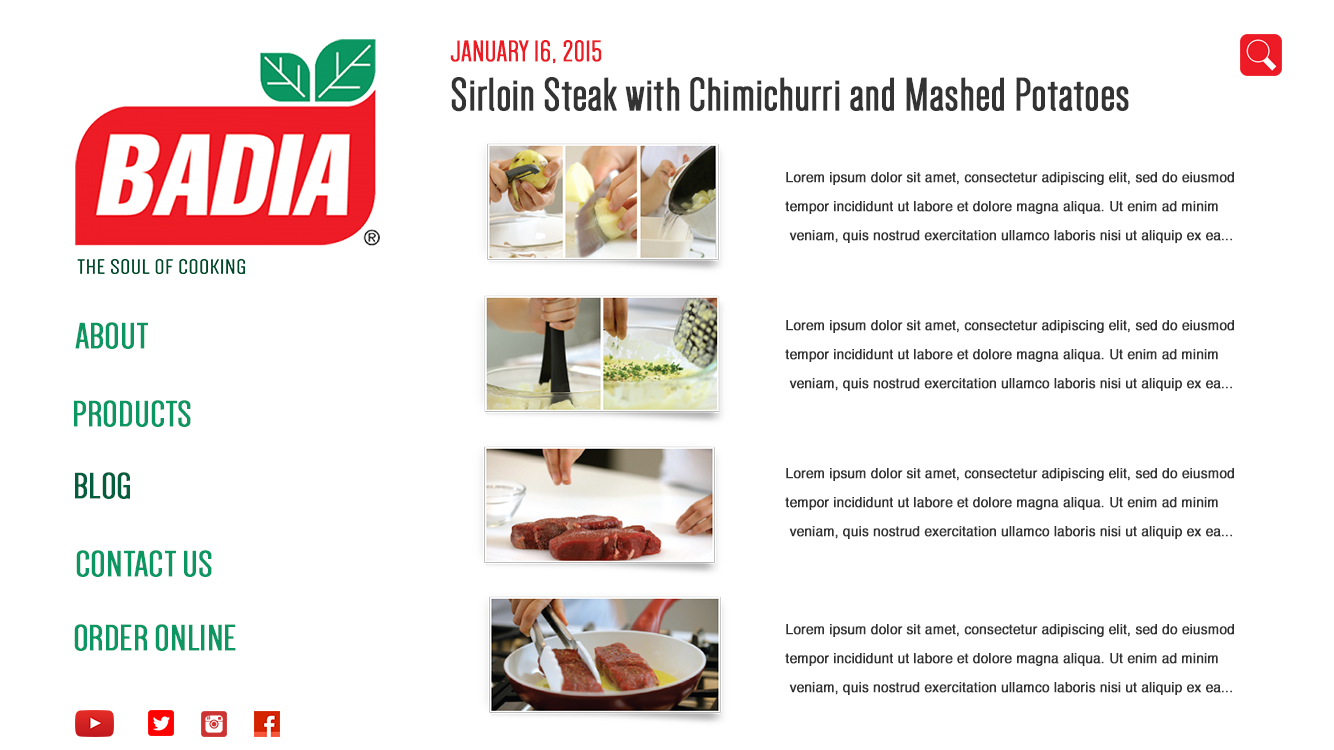
<style>
.page{position:relative;width:1334px;height:750px;background:#ffffff}
.page>*{position:absolute;margin:0}
.t1{font:30.6px "Dense-Regular";color:#ec1c25;text-transform:uppercase;font-weight:bold}
.t2{font:48.1px "Dense-Regular";color:#333333;font-weight:bold}
.t3{font:13.6px/29.2px "Helvetica";color:#333333;font-weight:bold}
.t4{font:37.5px "Dense-Regular";color:#0b9662;text-transform:uppercase;font-weight:bold;scale:1.1 1}
.t5{font:37.5px "Dense-Regular";color:#045d3c;text-transform:uppercase;font-weight:bold;scale:1.1 1}
</style>
<div class="page">
<p class="t1" style="left:450px;top:40px;width:152px;height:24px">january 16, 2015</p>
<p class="t2" style="left:451px;top:77px;width:678px;height:35px">Sirloin Steak with Chimichurri and Mashed Potatoes</p>
<p class="t3" style="left:785px;top:172px;width:449px;height:71px">Lorem ipsum dolor sit amet, consectetur adipiscing elit, sed do eiusmod <br>tempor incididunt ut labore et dolore magna aliqua. Ut enim ad minim<br> veniam, quis nostrud exercitation ullamco laboris nisi ut aliquip ex ea...</p>
<p class="t4" style="left:75px;top:322px;width:73px;height:27px">about</p>
<p class="t3" style="left:785px;top:320px;width:449px;height:71px">Lorem ipsum dolor sit amet, consectetur adipiscing elit, sed do eiusmod <br>tempor incididunt ut labore et dolore magna aliqua. Ut enim ad minim<br> veniam, quis nostrud exercitation ullamco laboris nisi ut aliquip ex ea...</p>
<p class="t4" style="left:74px;top:400px;width:117px;height:27px">products</p>
<p class="t5" style="left:75px;top:472px;width:55px;height:27px">blog</p>
<p class="t3" style="left:785px;top:468px;width:449px;height:71px">Lorem ipsum dolor sit amet, consectetur adipiscing elit, sed do eiusmod <br>tempor incididunt ut labore et dolore magna aliqua. Ut enim ad minim<br> veniam, quis nostrud exercitation ullamco laboris nisi ut aliquip ex ea...</p>
<p class="t4" style="left:76px;top:550px;width:136px;height:27px">contact us</p>
<p class="t4" style="left:74px;top:624px;width:162px;height:27px">order online</p>
<p class="t3" style="left:785px;top:624px;width:449px;height:71px">Lorem ipsum dolor sit amet, consectetur adipiscing elit, sed do eiusmod <br>tempor incididunt ut labore et dolore magna aliqua. Ut enim ad minim<br> veniam, quis nostrud exercitation ullamco laboris nisi ut aliquip ex ea...</p>
</div>
